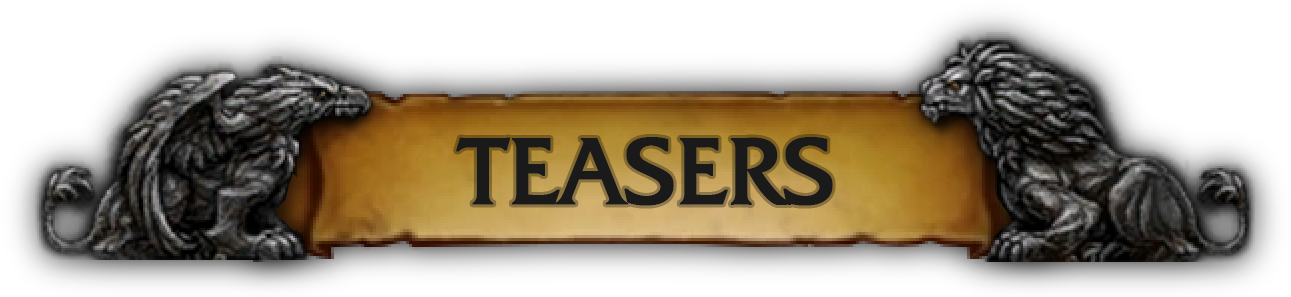
<style>
.page{position:relative;width:1291px;height:297px;background:#ffffff}
.page>*{position:absolute;margin:0}
.t1{font:93.3px "FrizQuadrataC";letter-spacing:0.01em;color:#1a1a1a;font-weight:bold}
</style>
<div class="page">
<p class="t1" style="left:456px;top:137px;width:377px;height:69px">TEASERS</p>
</div>
